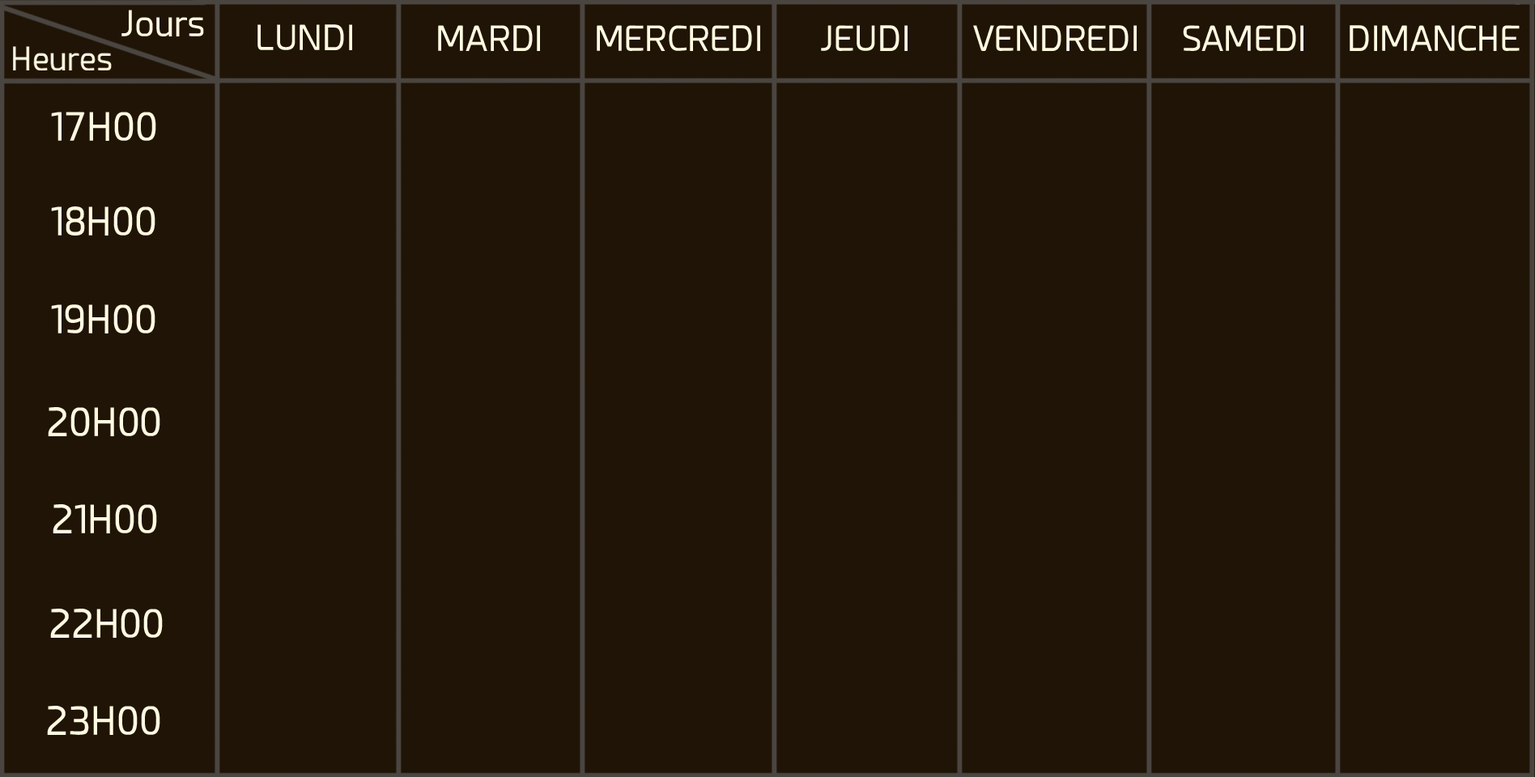
<style>
.page{position:relative;width:1535px;height:777px;background:#201407}
.page>*{position:absolute;margin:0}
.t1{font:34.3px "Esphimere";color:#fffae1}
.t2{font:38.9px "Esphimere";color:#fffae1}
</style>
<div class="page">
<p class="t1" style="left:257px;top:24px;width:95px;height:26px">LUNDI</p>
<p class="t1" style="left:438px;top:25px;width:102px;height:26px">MARDI</p>
<p class="t1" style="left:597px;top:25px;width:163px;height:26px">MERCREDI</p>
<p class="t1" style="left:821px;top:25px;width:86px;height:26px">JEUDI</p>
<p class="t1" style="left:973px;top:25px;width:163px;height:26px">VENDREDI</p>
<p class="t1" style="left:1183px;top:25px;width:120px;height:26px">SAMEDI</p>
<p class="t1" style="left:1349px;top:25px;width:170px;height:26px">DIMANCHE</p>
<p class="t2" style="left:51px;top:112px;width:105px;height:29px">17H00</p>
<p class="t2" style="left:51px;top:206px;width:104px;height:30px">18H00</p>
<p class="t2" style="left:51px;top:304px;width:104px;height:29px">19H00</p>
<p class="t2" style="left:48px;top:407px;width:112px;height:29px">20H00</p>
<p class="t2" style="left:53px;top:504px;width:104px;height:29px">21H00</p>
<p class="t2" style="left:50px;top:609px;width:113px;height:29px">22H00</p>
<p class="t2" style="left:47px;top:706px;width:113px;height:29px">23H00</p>
</div>
